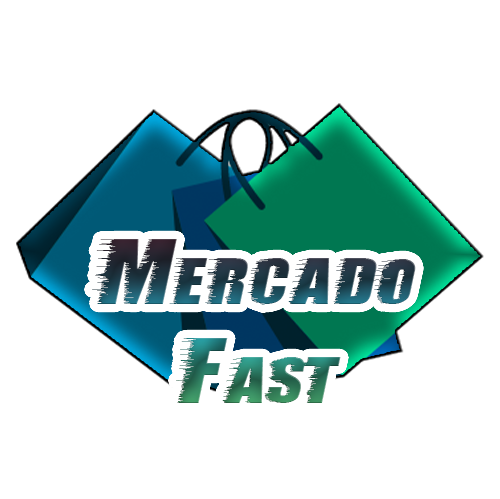
<style>
.page{position:relative;width:500px;height:499px;background:#ffffff}
.page>*{position:absolute;margin:0}
.t1{font:82.3px "StormExtraBold"}
</style>
<div class="page">
<p class="t1" style="left:92px;top:239px;width:324px;height:164px;text-align:center">Mercado<br>Fast</p>
</div>
